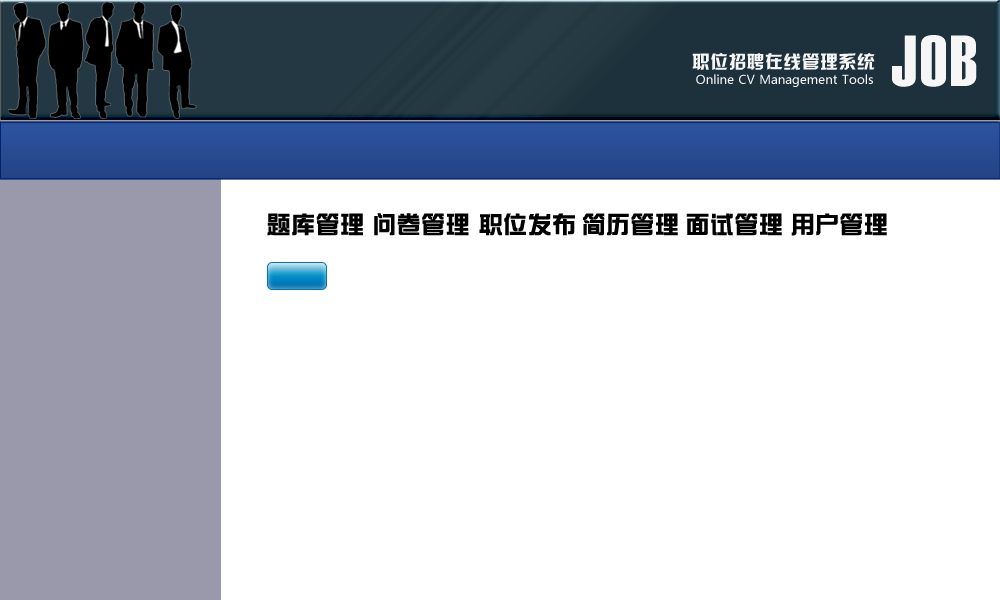
<style>
.page{position:relative;width:1000px;height:600px;background:#ffffff}
.page>*{position:absolute;margin:0}
.t1{font:72px "Haettenschweiler";letter-spacing:0.05em;color:#f6f6f6}
.t2{font:18px "HYk2gj";letter-spacing:0.05em;color:#f6f6f6}
.t3{font:12px "MicrosoftYaHei";letter-spacing:0.05em;color:#f6f6f6}
.t4{font:24px "DFZongYi-Bd-80-Win-GB";letter-spacing:0.05em;color:#000000}
</style>
<div class="page">
<p class="t1" style="left:892px;top:35px;width:85px;height:52px">JOB</p>
<p class="t2" style="left:692px;top:53px;width:183px;height:17px">职位招聘在线管理系统</p>
<p class="t3" style="left:696px;top:74px;width:177px;height:13px">Online CV Management Tools</p>
<p class="t4" style="left:267px;top:213px;width:96px;height:23px">题库管理</p>
<p class="t4" style="left:374px;top:213px;width:95px;height:23px">问卷管理</p>
<p class="t4" style="left:479px;top:213px;width:96px;height:23px">职位发布</p>
<p class="t4" style="left:583px;top:213px;width:95px;height:23px">简历管理</p>
<p class="t4" style="left:686px;top:213px;width:96px;height:23px">面试管理</p>
<p class="t4" style="left:791px;top:213px;width:96px;height:23px">用户管理</p>
</div>
